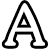
<style>
.page{position:relative;width:50px;height:50px;background:#ffffff}
.page>*{position:absolute;margin:0}
.t1{font:89.8px "JasmineUPC";letter-spacing:-0.01em;color:#ffffff;font-weight:bold}
</style>
<div class="page">
<p class="t1" style="left:4px;top:3px;width:41px;height:43px">A</p>
</div>
